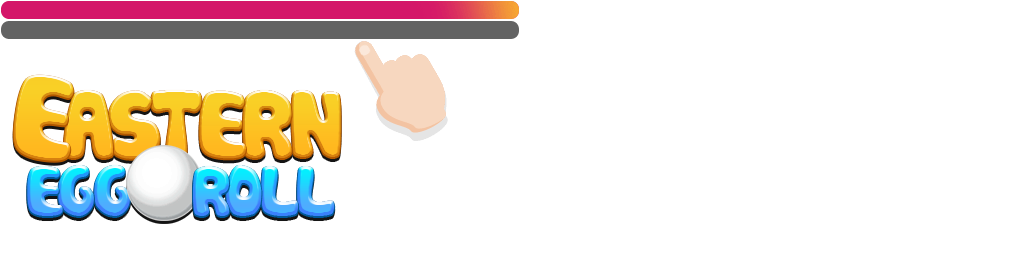
<style>
.page{position:relative;width:1024px;height:256px;background:#ffffff}
.page>*{position:absolute;margin:0}
.t1{font:116.8px "Cookies";letter-spacing:-0.02em;color:#fbc422}
.t2{font:93.4px "Cookies";letter-spacing:-0.02em;color:#fbc222}
.t3{font:91.9px "Cookies";letter-spacing:-0.02em;color:#fbc322}
.t4{font:93.4px "Cookies";letter-spacing:-0.02em}
.t5{font:93.4px "Cookies";letter-spacing:-0.02em;color:#fbc322}
.t6{font:93.4px "Cookies";letter-spacing:-0.02em;color:#fbc423}
.t7{font:69.6px "Cookies";letter-spacing:-0.02em}
</style>
<div class="page">
<p class="t1" style="left:13px;top:74px;width:61px;height:87px;rotate:8deg">E</p>
<p class="t2" style="left:63px;top:90px;width:50px;height:68px">A</p>
<p class="t3" style="left:108px;top:90px;width:52px;height:69px;rotate:-11deg">S</p>
<p class="t4" style="left:151px;top:90px;width:51px;height:68px">T</p>
<p class="t5" style="left:199px;top:90px;width:47px;height:69px;rotate:3deg">E</p>
<p class="t6" style="left:243px;top:90px;width:49px;height:68px">R</p>
<p class="t5" style="left:291px;top:90px;width:50px;height:67px">N</p>
<p class="t7" style="left:27px;top:166px;width:36px;height:50px">E</p>
<p class="t7" style="left:58px;top:165px;width:36px;height:51px">G</p>
<p class="t7" style="left:94px;top:165px;width:36px;height:51px">G</p>
<p class="t7" style="left:193px;top:166px;width:37px;height:50px">R</p>
<p class="t7" style="left:226px;top:165px;width:36px;height:51px">O</p>
<p class="t7" style="left:261px;top:166px;width:38px;height:50px">L</p>
<p class="t7" style="left:297px;top:166px;width:38px;height:50px">L</p>
</div>
